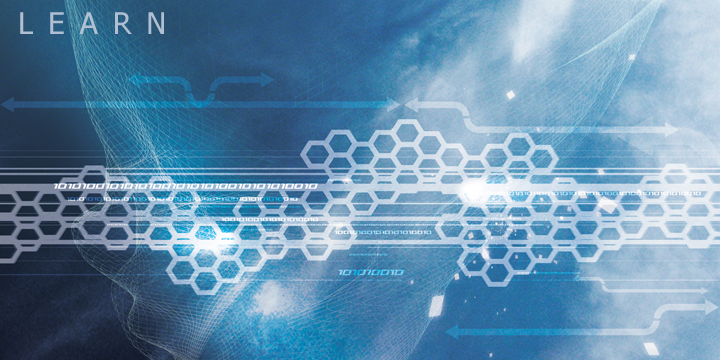
<style>
.page{position:relative;width:720px;height:360px}
.page>*{position:absolute;margin:0}
.t1{font:30px "Tahoma";letter-spacing:0.5em;color:#b0c0d2}
</style>
<div class="page">
<p class="t1" style="left:20px;top:12px;width:144px;height:22px">LEARN</p>
</div>
